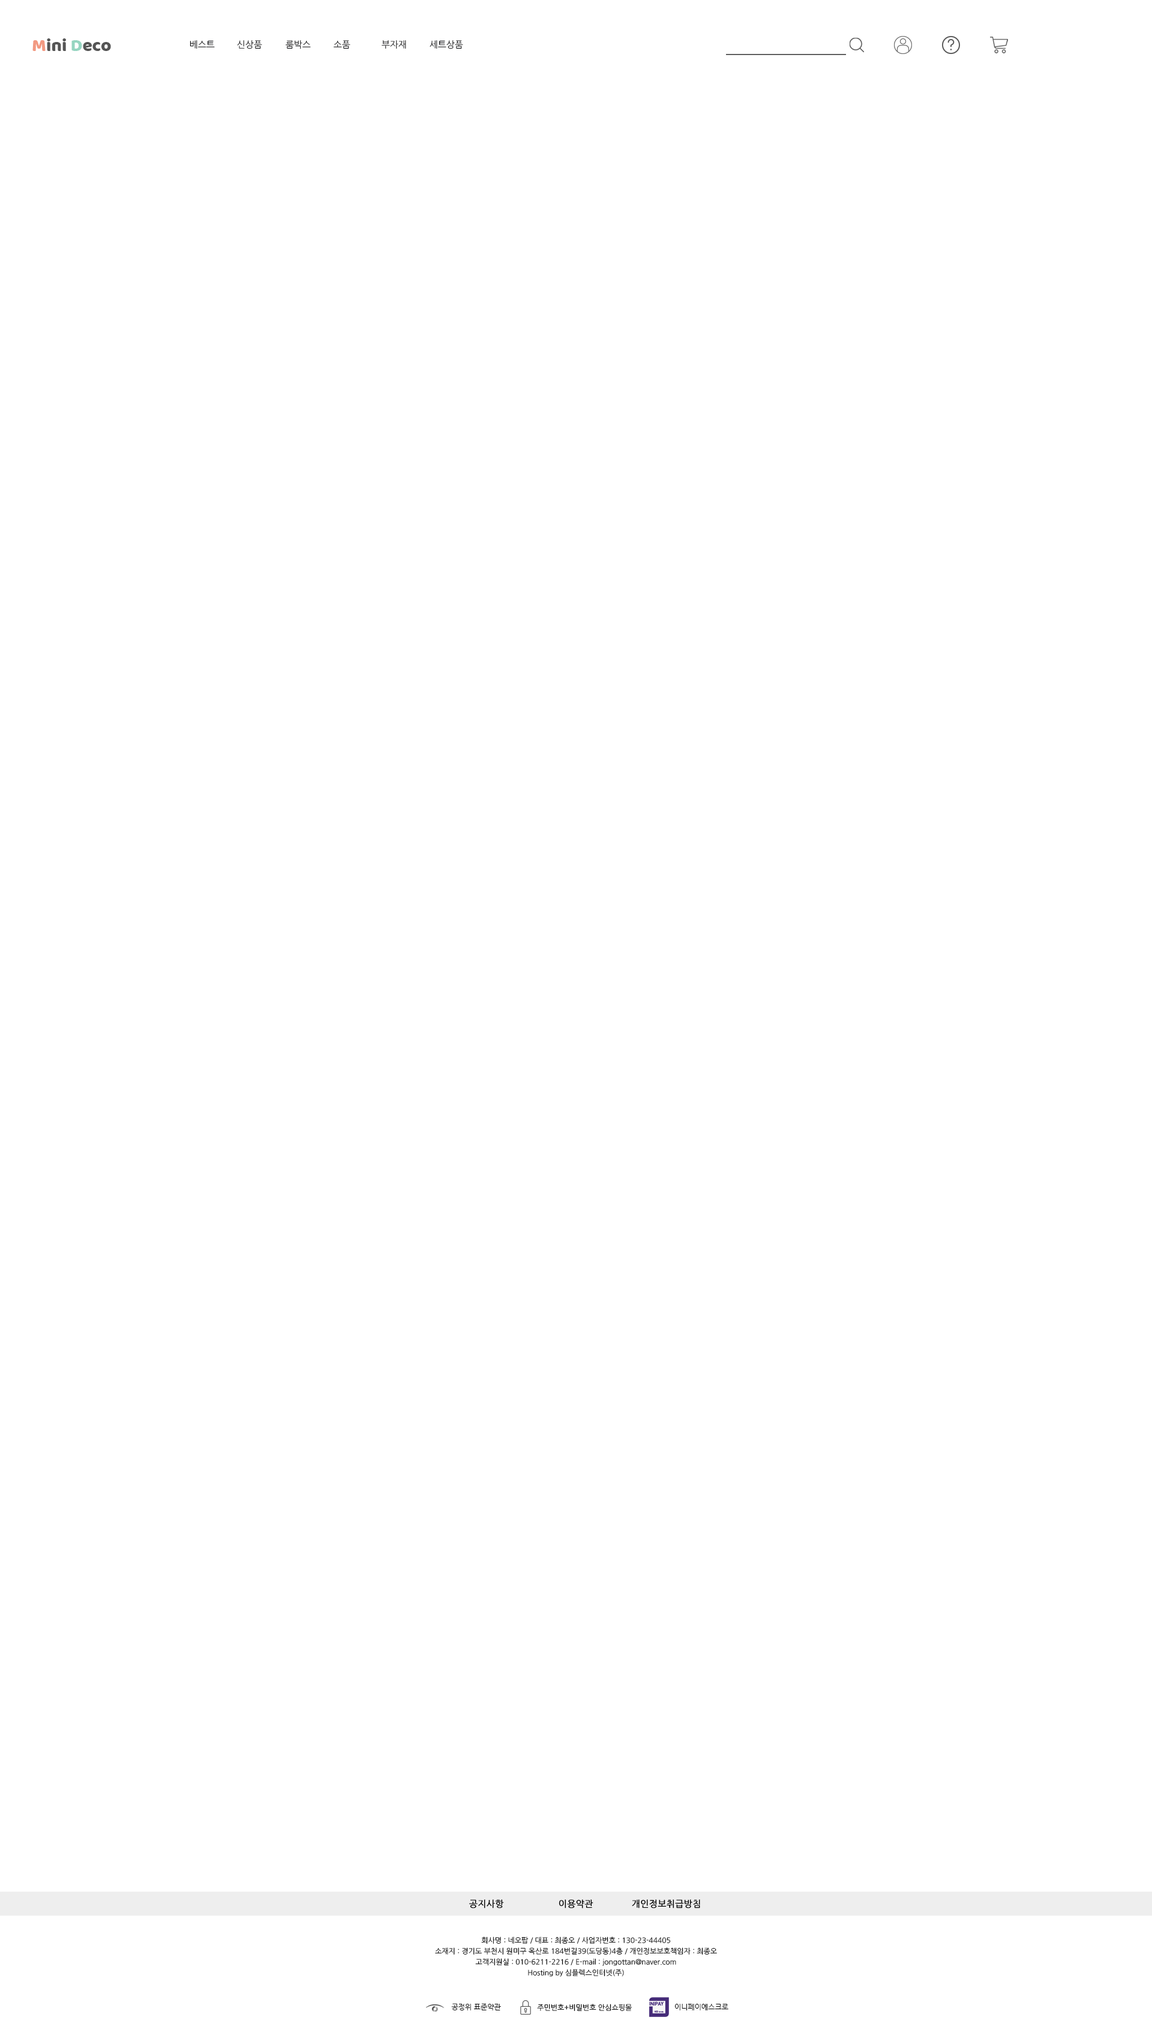
<style>
.page{position:relative;width:1152px;height:2038px;background:#ffffff}
.page>*{position:absolute;margin:0}
.t1{font:18px "Baloo-Regular";color:#555555}
.t2{font:18px "Baloo-Regular";color:#f29a82}
.t3{font:18px "Baloo-Regular";color:#96d5c1}
.t4{font:9px "NanumGothic";color:#121316}
.t5{font:9px "NanumGothic";color:#000000;font-weight:bold}
.t6{font:7.2px/10.8px "NanumGothic";color:#000000}
.t7{font:7.2px "NanumGothic";color:#000000}
</style>
<div class="page">
<p class="t1" style="left:32px;top:38px;width:79px;height:13px"><span class="t2">M</span>ini <span class="t3">D</span>eco</p>
<p class="t4" style="left:190px;top:40px;width:25px;height:9px">베스트</p>
<p class="t4" style="left:237px;top:40px;width:25px;height:9px">신상품</p>
<p class="t4" style="left:286px;top:40px;width:25px;height:9px">룸박스</p>
<p class="t4" style="left:334px;top:40px;width:16px;height:9px">소품</p>
<p class="t4" style="left:382px;top:40px;width:24px;height:9px">부자재</p>
<p class="t4" style="left:430px;top:40px;width:33px;height:9px">세트상품</p>
<p class="t5" style="left:469px;top:1900px;width:35px;height:9px">공지사항</p>
<p class="t5" style="left:559px;top:1900px;width:34px;height:9px">이용약관</p>
<p class="t5" style="left:632px;top:1900px;width:68px;height:9px">개인정보취급방침</p>
<p class="t6" style="left:435px;top:1937px;width:282px;height:40px;text-align:center">회사명 : 네오팝 / 대표 : 최종오 / 사업자번호 : 130-23-44405<br>소재지 : 경기도 부천시 원미구 옥산로 184번길39(도당동)4층 / 개인정보보호책임자 : 최종오<br>고객지원실 : 010-6211-2216 / E-mail : jongottan@naver.com<br>Hosting by 심플렉스인터넷(주)</p>
<p class="t7" style="left:451px;top:2003px;width:50px;height:8px">공정위 표준약관</p>
<p class="t7" style="left:537px;top:2004px;width:95px;height:7px">주민번호+비밀번호 안심쇼핑몰</p>
<p class="t7" style="left:675px;top:2004px;width:53px;height:7px">이니페이에스크로</p>
</div>
